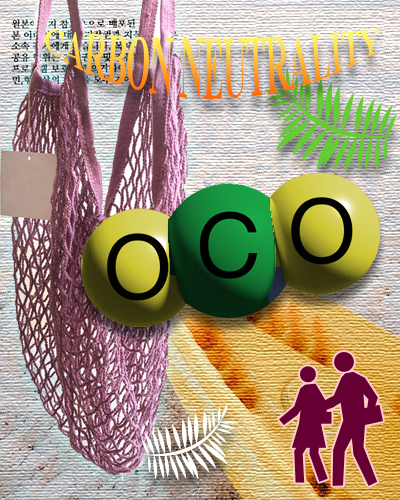
<style>
.page{position:relative;width:400px;height:500px}
.page>*{position:absolute;margin:0}
.t1{font:30px "TimesNewRomanPS-BoldMT"}
</style>
<div class="page">
<p class="t1" style="left:44px;top:28px;width:336px;height:71px">CARBON NEUTRALITY</p>
</div>
